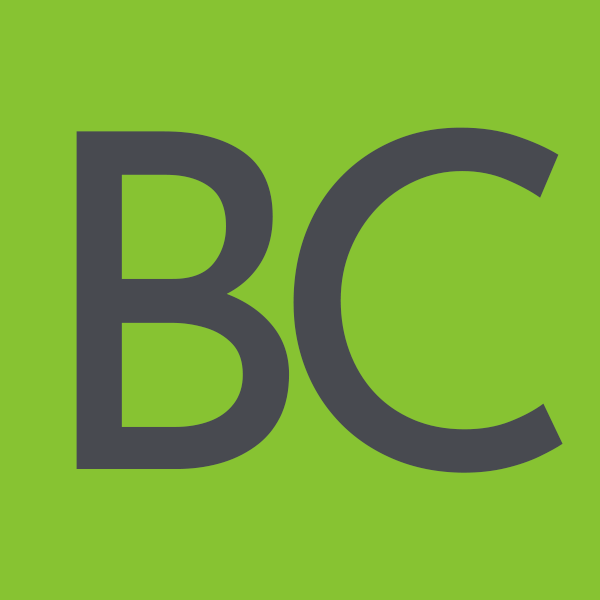
<style>
.page{position:relative;width:600px;height:600px;background:#87c332}
.page>*{position:absolute;margin:0}
.t1{font:467px "JosefinSansRoman-Regular";color:#484a50}
</style>
<div class="page">
<p class="t1" style="left:76px;top:131px;width:214px;height:338px">B</p>
<p class="t1" style="left:293px;top:127px;width:270px;height:346px">C</p>
</div>
